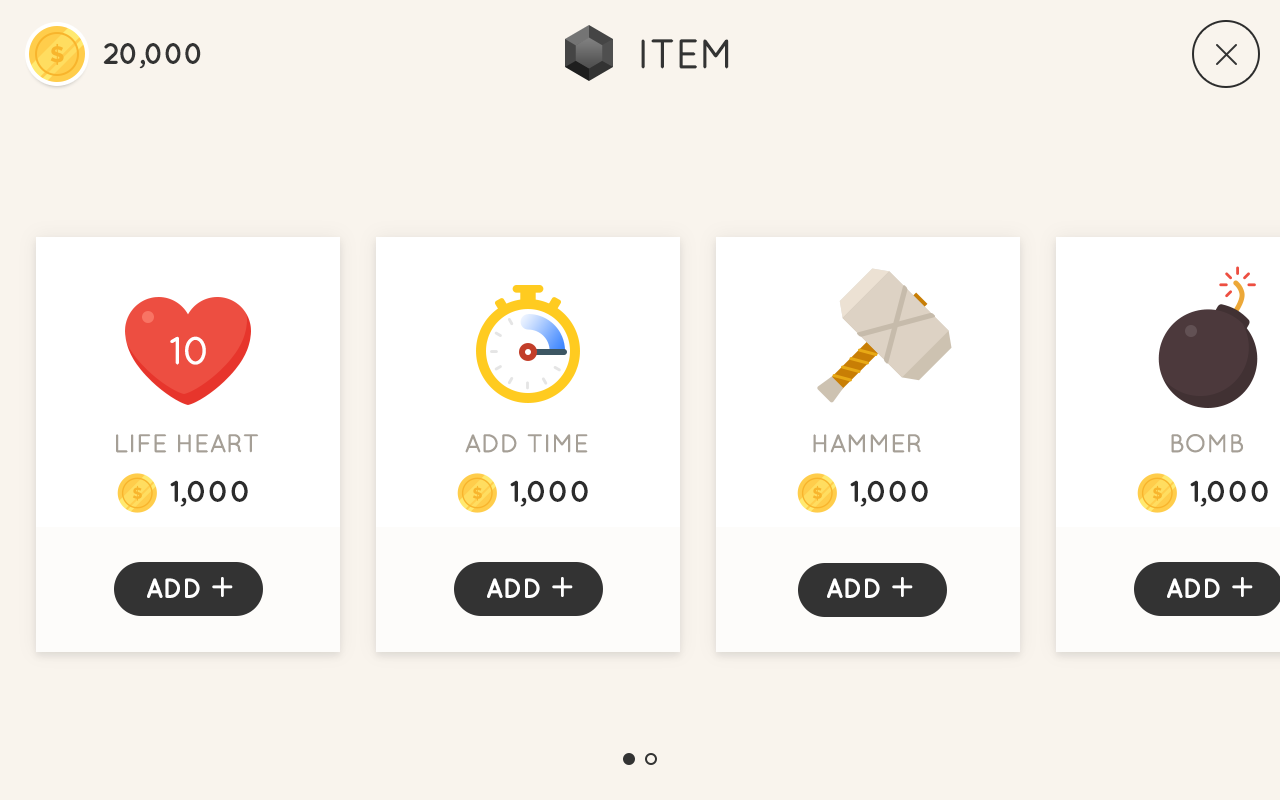
<style>
.page{position:relative;width:1280px;height:800px;background:#f9f4ed}
.page>*{position:absolute;margin:0}
.t1{font:40px "QuicksandBook-Regular";letter-spacing:-0.025em;color:#333333;text-transform:uppercase;font-weight:bold}
.t2{font:30px "QuicksandBold-Regular";letter-spacing:-0.05em;color:#333333;text-transform:uppercase}
.t3{font:38px "QuicksandBook-Regular";letter-spacing:-0.025em;color:#ffffff;text-transform:uppercase;font-weight:bold;scale:1.05 1}
.t4{font:24.7px "QuicksandBook-Regular";letter-spacing:-0.025em;color:#a59f96;text-transform:uppercase;font-weight:bold;scale:1.05 1}
.t5{font:24.7px "QuicksandBook-Regular";letter-spacing:-0.025em;color:#a59f96;font-weight:bold;scale:1.05 1}
.t6{font:30.4px "QuicksandBold-Regular";letter-spacing:-0.025em;color:#2c2c2c;text-transform:uppercase;scale:1.05 1}
.t7{font:28px "QuicksandBold-Regular";letter-spacing:-0.025em;color:#ffffff;text-transform:uppercase}
.t8{font:40px "QuicksandBook-Regular";letter-spacing:-0.025em;color:#ffffff;text-transform:uppercase}
</style>
<div class="page">
<p class="t1" style="left:641px;top:39px;width:88px;height:30px">item</p>
<p class="t2" style="left:103px;top:43px;width:98px;height:26px">20,000</p>
<p class="t3" style="left:170px;top:336px;width:36px;height:29px">10</p>
<p class="t4" style="left:116px;top:434px;width:143px;height:19px">LiFE Heart</p>
<p class="t5" style="left:465px;top:434px;width:123px;height:19px">ADD TIME</p>
<p class="t5" style="left:813px;top:434px;width:108px;height:19px">HAMMER</p>
<p class="t5" style="left:1171px;top:434px;width:73px;height:19px">BOMB</p>
<p class="t6" style="left:170px;top:480px;width:78px;height:27px">1,000</p>
<p class="t6" style="left:510px;top:480px;width:78px;height:27px">1,000</p>
<p class="t6" style="left:850px;top:480px;width:78px;height:27px">1,000</p>
<p class="t6" style="left:1190px;top:480px;width:78px;height:27px">1,000</p>
<p class="t7" style="left:147px;top:577px;width:86px;height:21px">ADD <span class="t8">+</span></p>
<p class="t7" style="left:487px;top:577px;width:86px;height:21px">ADD <span class="t8">+</span></p>
<p class="t7" style="left:827px;top:577px;width:86px;height:21px">ADD <span class="t8">+</span></p>
<p class="t7" style="left:1167px;top:577px;width:86px;height:21px">ADD <span class="t8">+</span></p>
</div>
